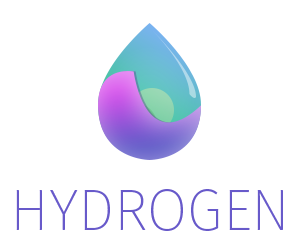
<style>
.page{position:relative;width:300px;height:250px;background:#ffffff}
.page>*{position:absolute;margin:0}
.t1{font:58px "FiraSans-UltraLight";color:#685aca}
</style>
<div class="page">
<p class="t1" style="left:16px;top:189px;width:267px;height:42px">HYDROGEN</p>
</div>
